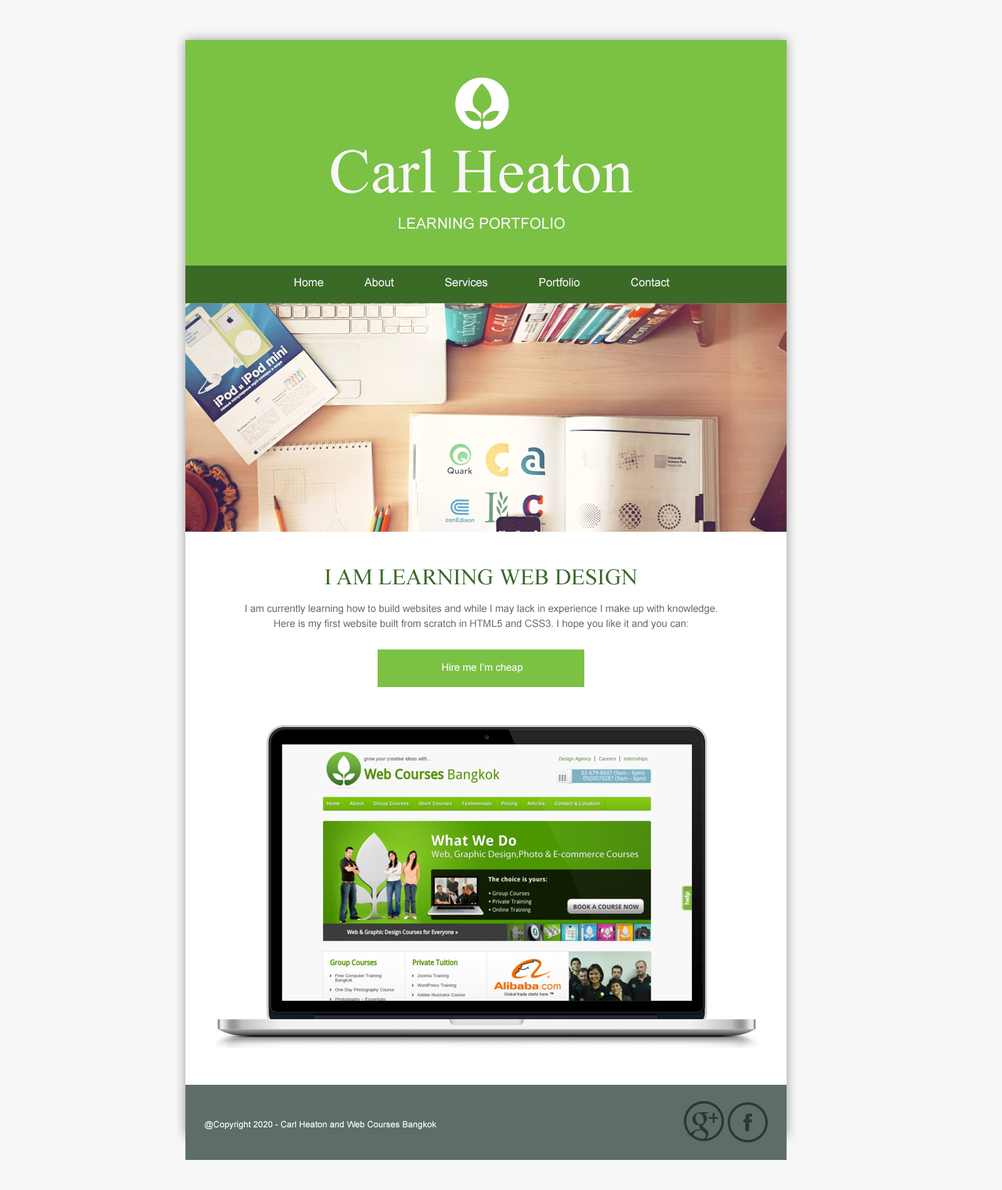
<style>
.page{position:relative;width:1002px;height:1190px;background:#f7f7f7}
.page>*{position:absolute;margin:0}
.t1{font:62.6px "TimesNewRomanPSMT";color:#f7f7f7}
.t2{font:15px "ArialMT";color:#f7f7f7;text-transform:uppercase}
.t3{font:11.3px "ArialMT";color:#f7f7f7}
.t4{font:22.5px "TimesNewRomanPSMT";color:#3b6a26;text-transform:uppercase}
.t5{font:10px/15px "ArialMT";color:#5e6d66}
.t6{font:10px "ArialMT";color:#ffffff}
.t7{font:8.8px "ArialMT";color:#ffffff}
</style>
<div class="page">
<p class="t1" style="left:331px;top:148px;width:302px;height:46px">Carl Heaton</p>
<p class="t2" style="left:399px;top:217px;width:166px;height:12px">Learning Portfolio</p>
<p class="t3" style="left:294px;top:277px;width:376px;height:10px">Home About Services Portfolio Contact</p>
<p class="t4" style="left:324px;top:569px;width:314px;height:16px">I am learning Web design</p>
<p class="t5" style="left:246px;top:604px;width:471px;height:25px;text-align:center">I am currently learning how to build websites and while I may lack in experience I make up with knowledge.<br>Here is my first website built from scratch in HTML5 and CSS3. I hope you like it and you can:</p>
<p class="t6" style="left:442px;top:663px;width:81px;height:10px">Hire me I’m cheap</p>
<p class="t7" style="left:205px;top:1120px;width:232px;height:9px">@Copyright 2020 - Carl Heaton and Web Courses Bangkok</p>
</div>
